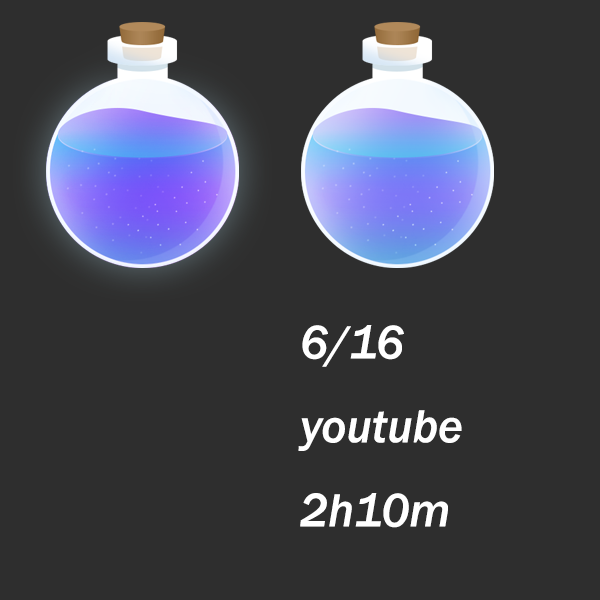
<style>
.page{position:relative;width:600px;height:600px;background:#2e2e2e}
.page>*{position:absolute;margin:0}
.t1{font:48px "FranklinGothic-MediumItalic";color:#ffffff}
</style>
<div class="page">
<p class="t1" style="left:298px;top:325px;width:164px;height:203px">6/16 <br>youtube<br>2h10m</p>
</div>
